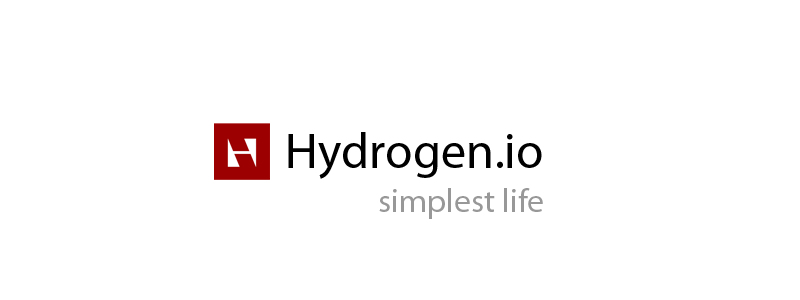
<style>
.page{position:relative;width:800px;height:300px;background:#ffffff}
.page>*{position:absolute;margin:0}
.t1{font:50px "MyriadPro-Regular";color:#000000}
.t2{font:33.3px "MyriadPro-Regular";color:#989898}
</style>
<div class="page">
<p class="t1" style="left:288px;top:132px;width:254px;height:47px">Hydrogen.io</p>
<p class="t2" style="left:379px;top:188px;width:164px;height:31px">simplest life</p>
</div>
